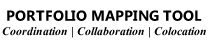
<style>
.page{position:relative;width:210px;height:45px;background:#ffffff}
.page>*{position:absolute;margin:0}
.t1{font:14.6px "LaoUI-Bold";color:#000000}
.t2{font:14.6px "Aparajita-BoldItalic";color:#000000}
</style>
<div class="page">
<p class="t1" style="left:7px;top:10px;width:195px;height:11px">PORTFOLIO MAPPING TOOL</p>
<p class="t2" style="left:2px;top:27px;width:204px;height:11px">Coordination | Collaboration | Colocation</p>
</div>
